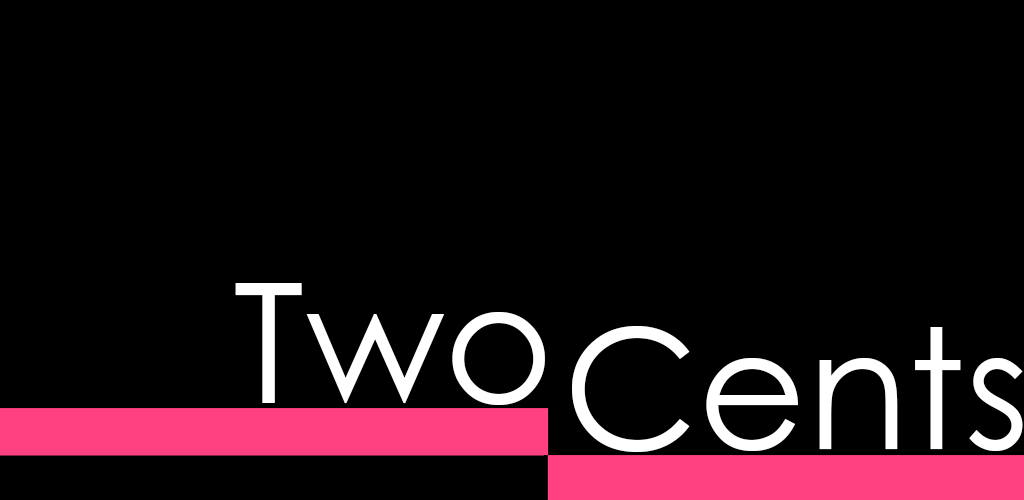
<style>
.page{position:relative;width:1024px;height:500px;background:#000000}
.page>*{position:absolute;margin:0}
.t1{font:166.7px "CenturyGothic";color:#ffffff}
</style>
<div class="page">
<p class="t1" style="left:235px;top:283px;width:310px;height:122px">Two</p>
<p class="t1" style="left:572px;top:326px;width:451px;height:126px">Cents</p>
</div>
